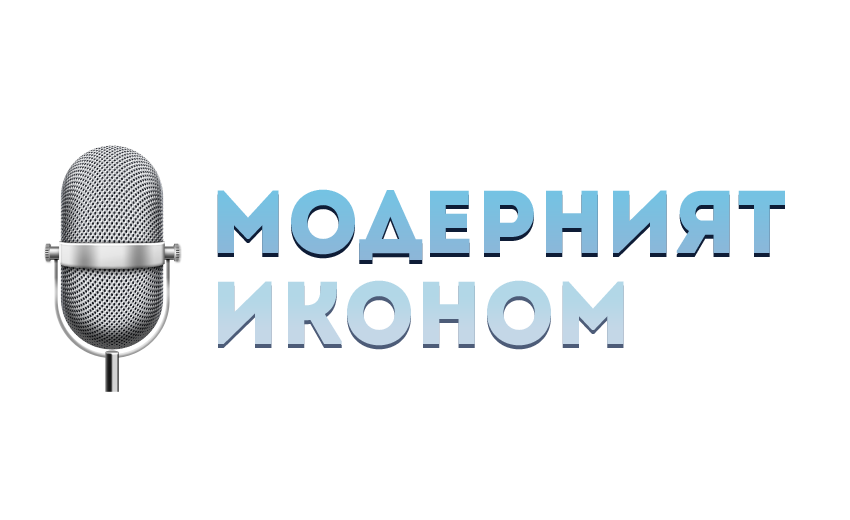
<style>
.page{position:relative;width:850px;height:520px;background:#ffffff}
.page>*{position:absolute;margin:0}
.t1{font:89px "Intro";color:#7ebcdd}
.t2{font:89px "Intro";color:#7fbdde}
.t3{font:89px "Intro";color:#bad7e7}
</style>
<div class="page">
<p class="t1" style="left:217px;top:193px;width:568px;height:71px">Модерният</p>
<p class="t2" style="left:217px;top:189px;width:568px;height:71px">Модерният</p>
<p class="t3" style="left:218px;top:280px;width:406px;height:66px">иконом</p>
<p class="t3" style="left:218px;top:284px;width:406px;height:66px">иконом</p>
</div>
